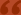
<style>
.page{position:relative;width:21px;height:15px;background:#b64927}
.page>*{position:absolute;margin:0}
.t1{font:64px "AndaleMono";letter-spacing:-0.1em;color:#8e2800;font-style:italic}
</style>
<div class="page">
<p class="t1" style="left:0px;top:0px;width:22px;height:15px;opacity:0.9">“</p>
</div>
